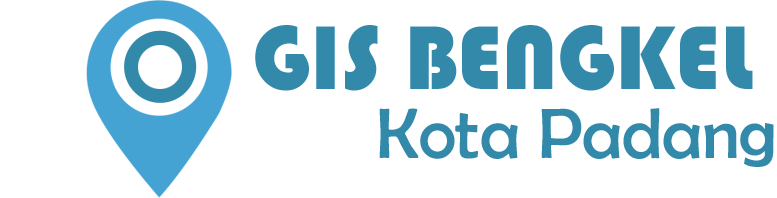
<style>
.page{position:relative;width:777px;height:198px;background:#ffffff}
.page>*{position:absolute;margin:0}
.t1{font:93.7px "Bauhaus93";color:#3389aa}
.t2{font:71.7px "BerlinSansFB-Reg";color:#3389aa}
</style>
<div class="page">
<p class="t1" style="left:255px;top:25px;width:498px;height:66px">GIS BENGKEL</p>
<p class="t2" style="left:379px;top:108px;width:395px;height:59px">Kota Padang</p>
</div>
